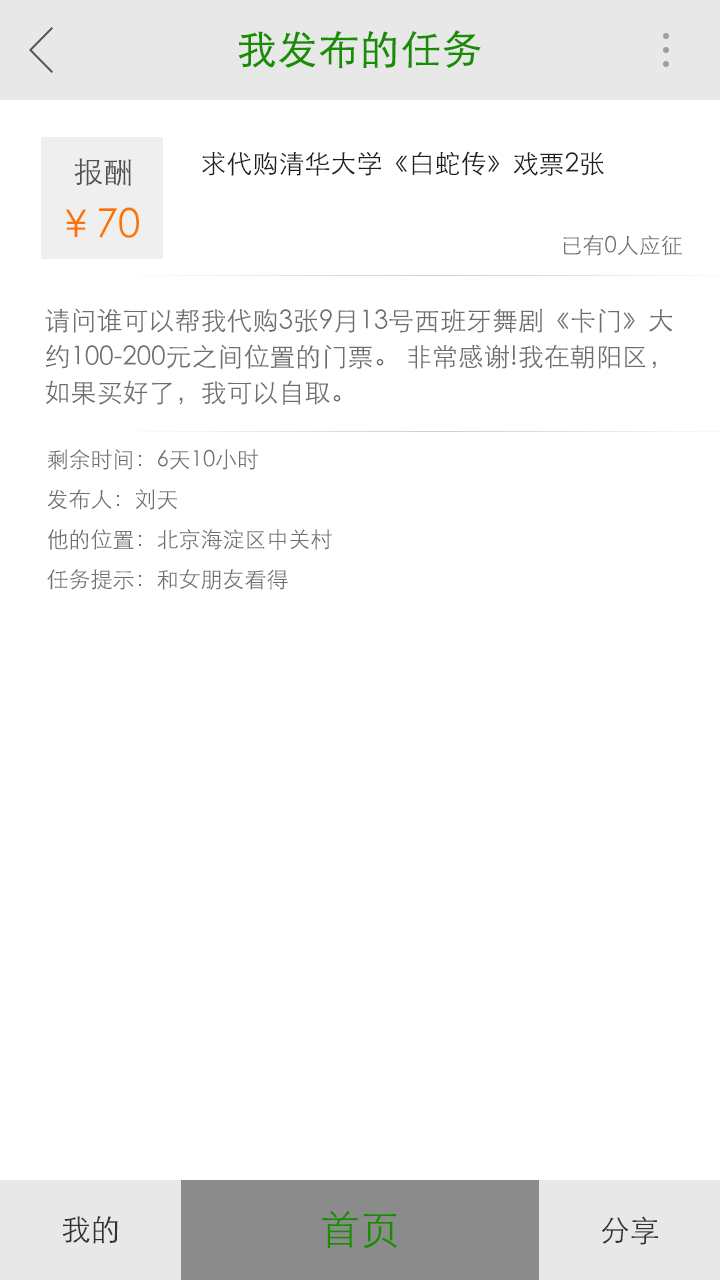
<style>
.page{position:relative;width:720px;height:1280px;background:#ffffff}
.page>*{position:absolute;margin:0}
.t1{font:40px "STXihei";color:#178d00;font-weight:bold}
.t2{font:40px/12px "STXihei";color:#ff7200}
.t3{font:36px/52px "STXihei";color:#767676}
.t4{font:30px/12px "STXihei";color:#515151}
.t5{font:26px "STXihei";color:#1d1d1d}
.t6{font:22px "STXihei";color:#6e6e6e}
.t7{font:26px/36px "STXihei";color:#6e6e6e}
.t8{font:30px "STXihei";color:#313131}
.t9{font:40px "STXihei";color:#178d00}
</style>
<div class="page">
<p class="t1" style="left:238px;top:30px;width:243px;height:39px">我发布的任务</p>
<p class="t2" style="left:65px;top:158px;width:74px;height:80px;text-align:justify"><span class="t3">  </span><span class="t4">报酬<br></span>￥70</p>
<p class="t5" style="left:202px;top:151px;width:402px;height:25px">求代购清华大学《白蛇传》戏票2张</p>
<p class="t6" style="left:563px;top:235px;width:119px;height:21px">已有0人应征</p>
<p class="t7" style="left:45px;top:308px;width:628px;height:97px;text-align:justify">请问谁可以帮我代购3张9月13号西班牙舞剧《卡门》大<br>约100-200元之间位置的门票。 非常感谢!我在朝阳区，<br>如果买好了，我可以自取。</p>
<p class="t6" style="left:47px;top:449px;width:211px;height:21px">剩余时间：6天10小时</p>
<p class="t6" style="left:47px;top:489px;width:130px;height:21px">发布人：刘天</p>
<p class="t6" style="left:47px;top:529px;width:285px;height:21px">他的位置：北京海淀区中关村</p>
<p class="t6" style="left:47px;top:569px;width:241px;height:21px">任务提示：和女朋友看得</p>
<p class="t8" style="left:62px;top:1216px;width:56px;height:28px">我的</p>
<p class="t9" style="left:322px;top:1211px;width:75px;height:38px">首页</p>
<p class="t8" style="left:601px;top:1216px;width:57px;height:29px">分享</p>
</div>
